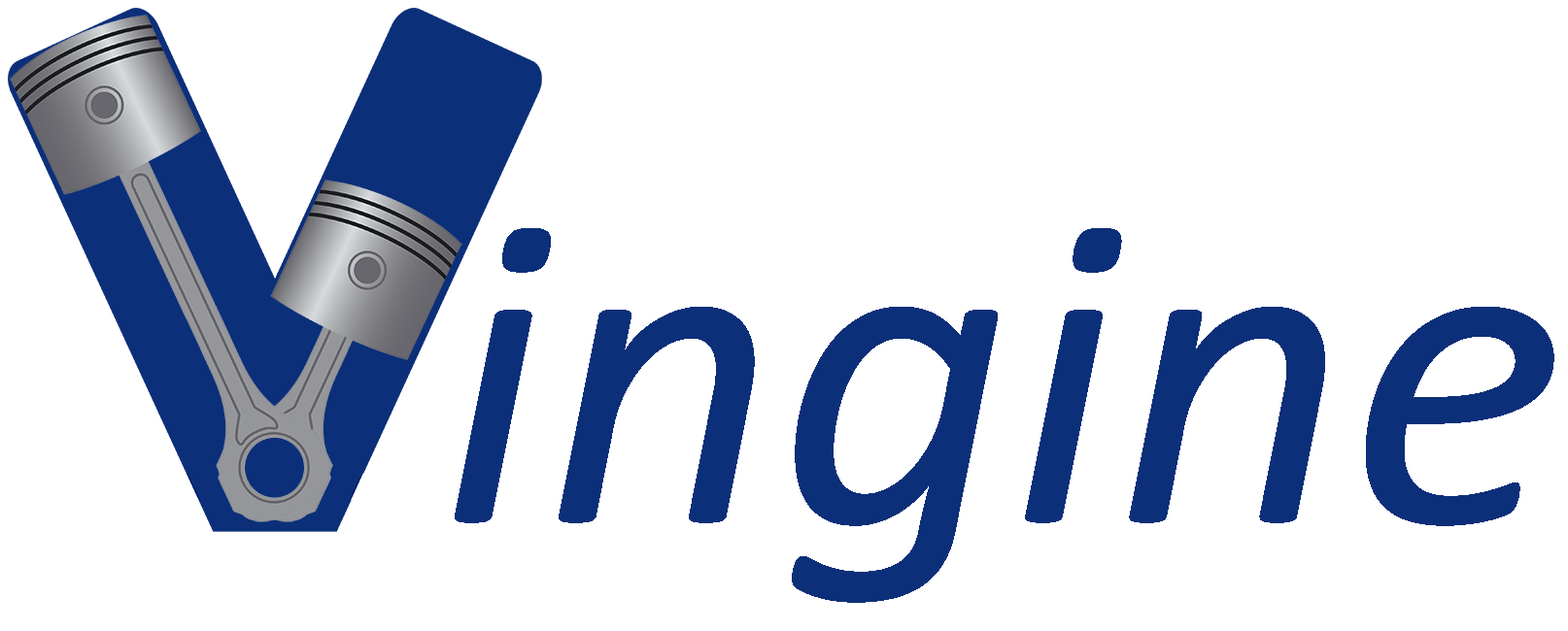
<style>
.page{position:relative;width:1568px;height:631px;background:#ffffff}
.page>*{position:absolute;margin:0}
.t1{font:453.6px "Calibri-Italic";color:#0c2f79}
</style>
<div class="page">
<p class="t1" style="left:455px;top:228px;width:1099px;height:375px">ingine</p>
</div>
